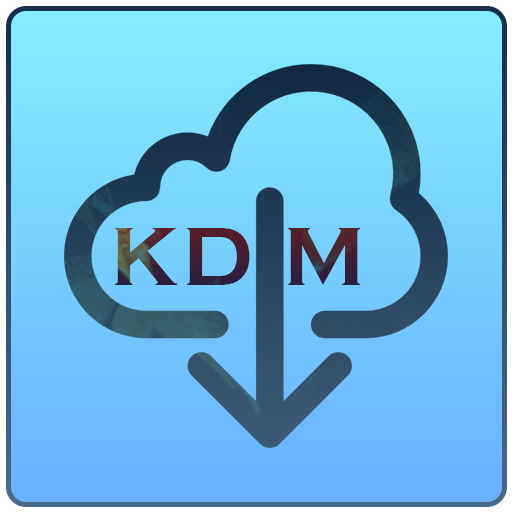
<style>
.page{position:relative;width:512px;height:512px}
.page>*{position:absolute;margin:0}
.t1{font:84.7px "CopperplateGothic-Bold";letter-spacing:0.05em}
</style>
<div class="page">
<p class="t1" style="left:115px;top:228px;width:245px;height:57px">KD M</p>
</div>
